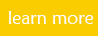
<style>
.page{position:relative;width:98px;height:36px;background:#facd00}
.page>*{position:absolute;margin:0}
.t1{font:18px "MaiandraGD-Regular";color:#ffffff}
</style>
<div class="page">
<p class="t1" style="left:8px;top:11px;width:85px;height:13px">learn more</p>
</div>
